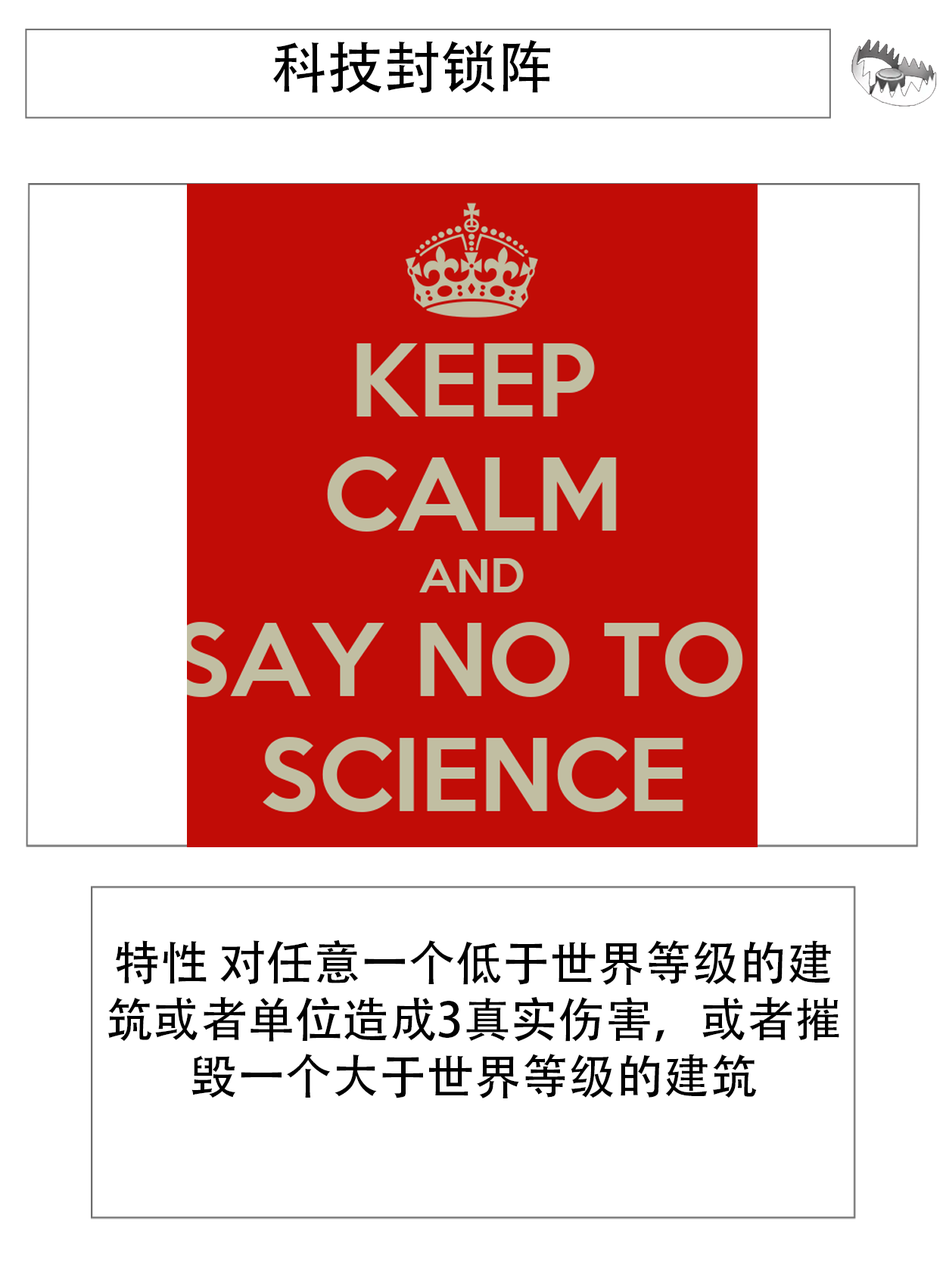
<style>
.page{position:relative;width:946px;height:1261px;background:#ffffff}
.page>*{position:absolute;margin:0}
.t1{font:56.7px "AdobeHeitiStd-Regular";color:#000000}
.t2{font:47.3px "AdobeHeitiStd-Regular";color:#000000}
</style>
<div class="page">
<p class="t1" style="left:273px;top:39px;width:277px;height:54px">科技封锁阵</p>
<p class="t2" style="left:108px;top:940px;width:731px;height:158px;text-align:center">特性 对任意一个低于世界等级的建筑或者单位造成3真实伤害，或者摧毁一个大于世界等级的建筑</p>
</div>
